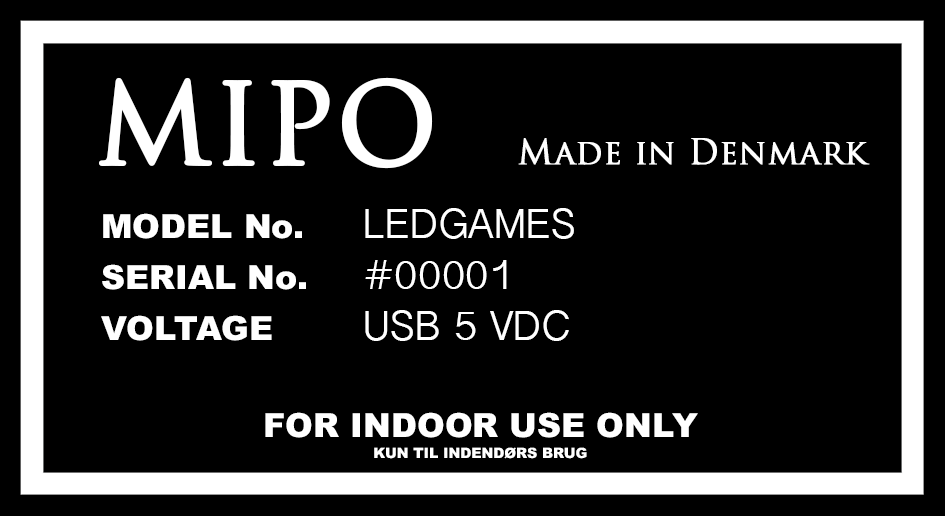
<style>
.page{position:relative;width:945px;height:516px;background:#000000}
.page>*{position:absolute;margin:0}
.t1{font:33.4px "TrajanPro-Regular";color:#ffffff;font-weight:bold}
.t2{font:109.2px "TrajanPro-Regular";color:#ffffff;font-weight:bold}
.t3{font:33.4px "Arial-Black";color:#ffffff}
.t4{font:42.5px "GujaratiSangamMN";color:#ffffff}
.t5{font:24.3px "Arial-Black";color:#ffffff}
</style>
<div class="page">
<p class="t1" style="left:98px;top:77px;width:772px;height:92px"><span class="t2">MIPO  </span>Made in Denmark</p>
<p class="t3" style="left:101px;top:208px;width:473px;height:133px">MODEL No.   <span class="t4">LEDGAMES<br></span>SERIAL No.   <span class="t4">#00001<br></span>VOLTAGE    <span class="t4">USB 5 VDC</span></p>
<p class="t5" style="left:265px;top:412px;width:433px;height:47px;text-align:center"><span class="t3">FOR INDOOR USE ONLY<br></span>KUN TIL INDENDØRS BRUG</p>
</div>
